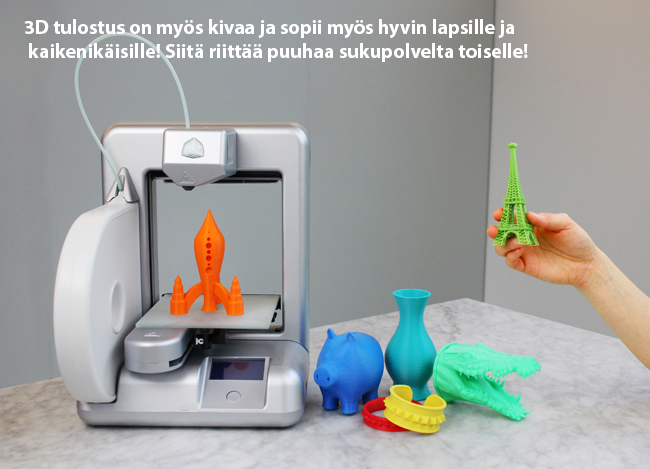
<style>
.page{position:relative;width:650px;height:469px}
.page>*{position:absolute;margin:0}
.t1{font:19.9px "MyriadPro-Bold";color:#ffffff}
</style>
<div class="page">
<p class="t1" style="left:24px;top:19px;width:504px;height:43px">3D tulostus on myös kivaa ja sopii myös hyvin lapsille ja<br> kaikenikäisille! Siitä riittää puuhaa sukupolvelta toiselle!</p>
</div>
